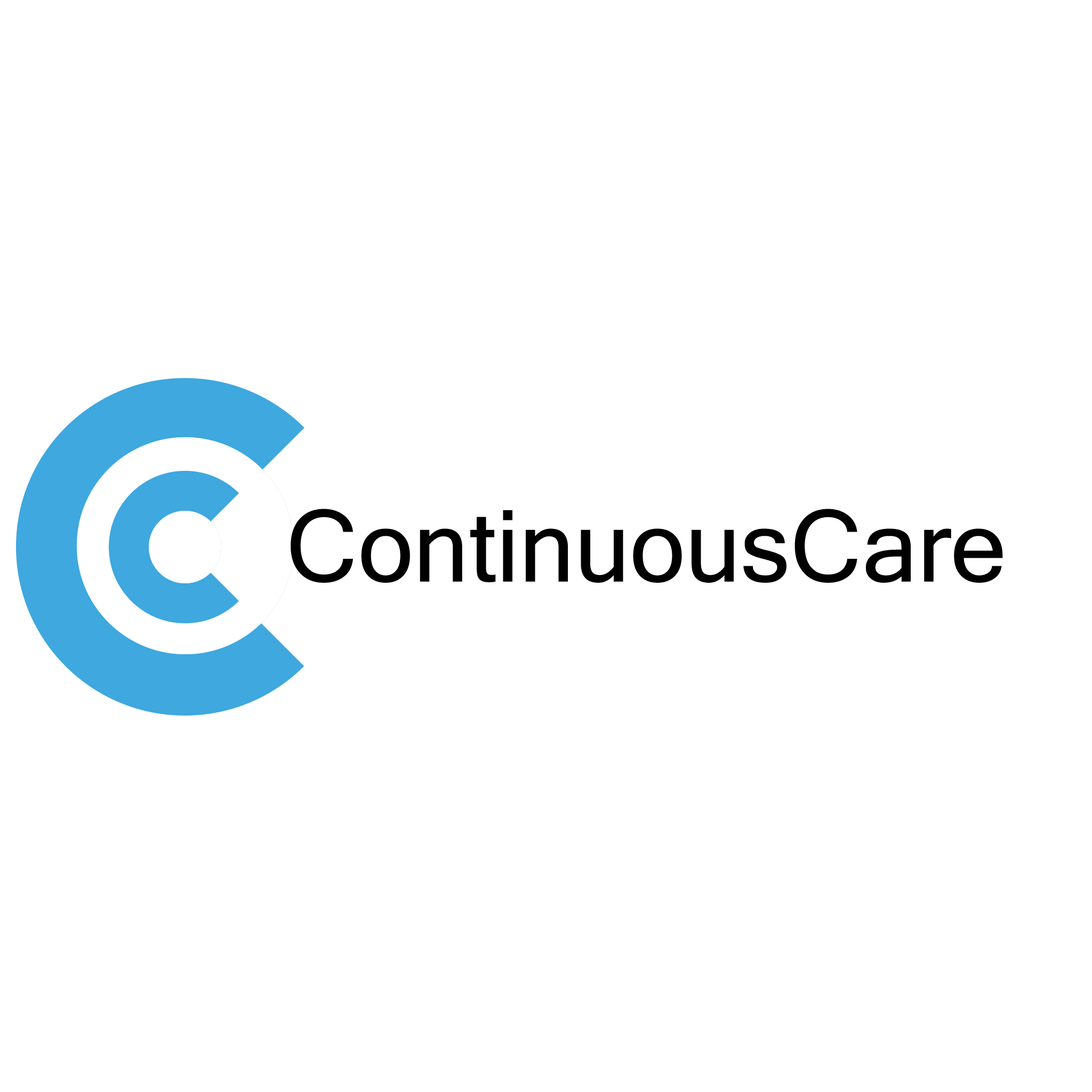
<style>
.page{position:relative;width:1092px;height:1092px;background:#ffffff}
.page>*{position:absolute;margin:0}
.t1{font:99.5px "MicrosoftSansSerif";color:#000000}
</style>
<div class="page">
<p class="t1" style="left:291px;top:509px;width:712px;height:74px">ContinuousCare</p>
</div>
